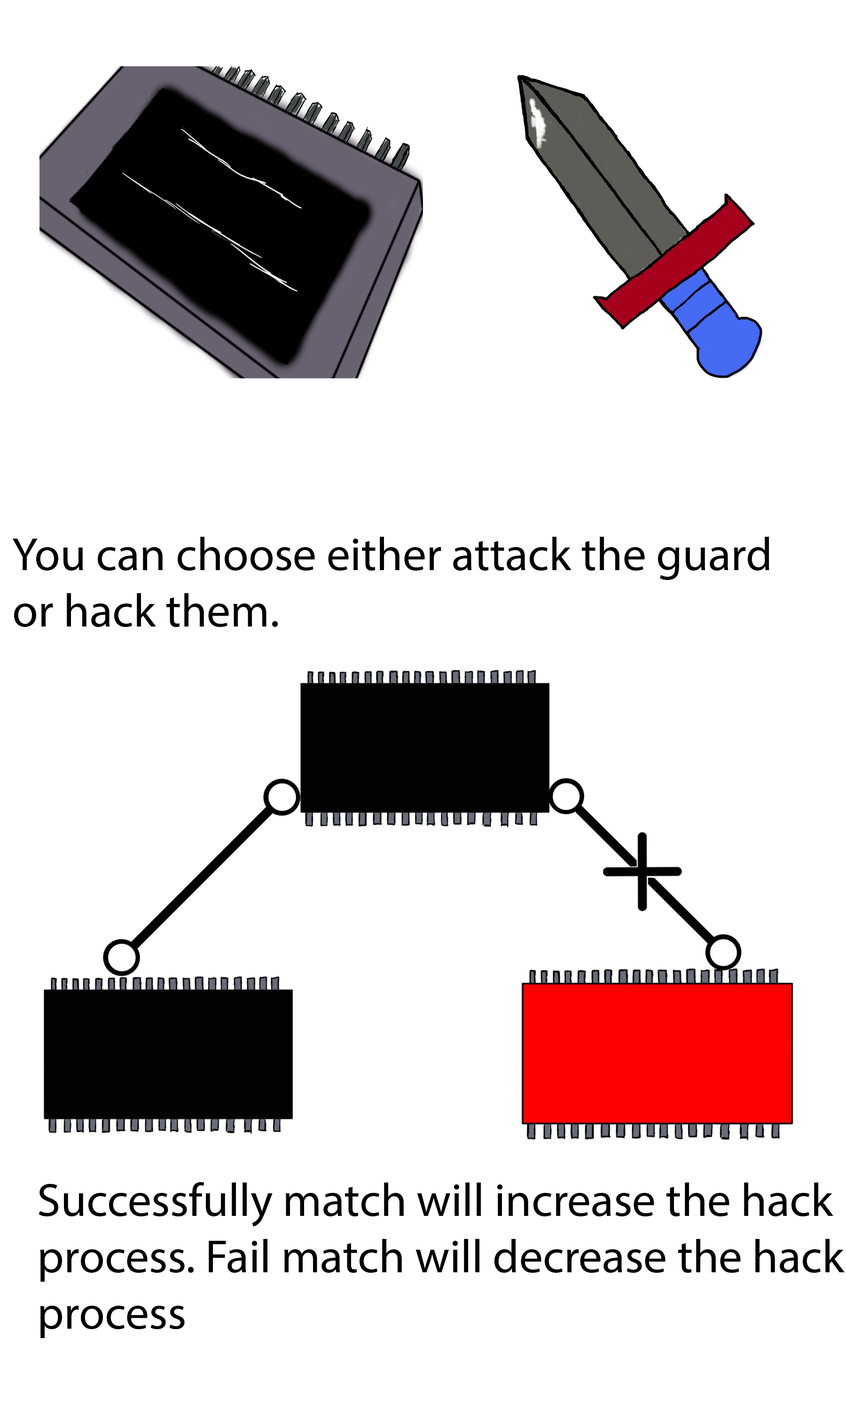
<style>
.page{position:relative;width:846px;height:1410px;background:#ffffff}
.page>*{position:absolute;margin:0}
.t1{font:47px "MyriadPro-Regular";color:#000000}
</style>
<div class="page">
<p class="t1" style="left:13px;top:537px;width:756px;height:90px">You can choose either attack the guard<br>or hack them.</p>
<p class="t1" style="left:39px;top:1182px;width:805px;height:156px">Successfully match will increase the hack<br>process. Fail match will decrease the hack<br>process</p>
</div>
